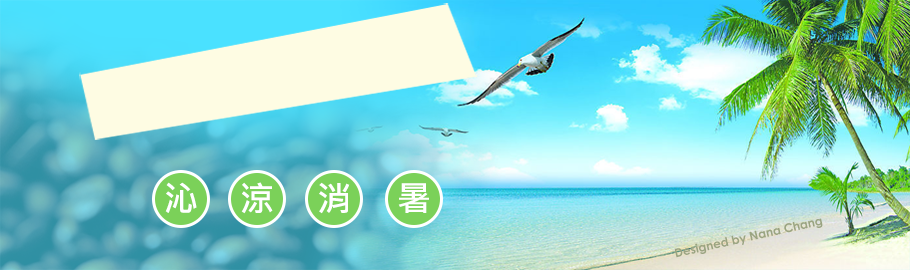
<style>
.page{position:relative;width:910px;height:270px}
.page>*{position:absolute;margin:0}
.t1{font:34.5px "MicrosoftJhengHeiBold";letter-spacing:0.025em;color:#ffffff}
</style>
<div class="page">
<p class="t1" style="left:165px;top:182px;width:32px;height:31px">沁</p>
<p class="t1" style="left:241px;top:182px;width:32px;height:32px">涼</p>
<p class="t1" style="left:319px;top:182px;width:31px;height:32px">消</p>
<p class="t1" style="left:398px;top:183px;width:31px;height:30px">暑</p>
</div>
